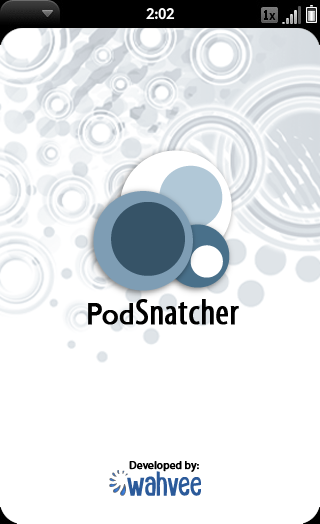
<style>
.page{position:relative;width:320px;height:524px;background:#ffffff}
.page>*{position:absolute;margin:0}
.t1{font:36px "MyriadPro-Cond";color:#000000;font-weight:bold}
.t2{font:30px "GillSansMT";color:#000000;font-weight:bold}
.t3{font:11px "MyriadPro-Regular";color:#000000;font-weight:bold}
</style>
<div class="page">
<p class="t1" style="left:88px;top:299px;width:151px;height:26px"><span class="t2">Pod</span>Snatcher</p>
<p class="t3" style="left:129px;top:461px;width:70px;height:11px">Developed by:</p>
</div>
